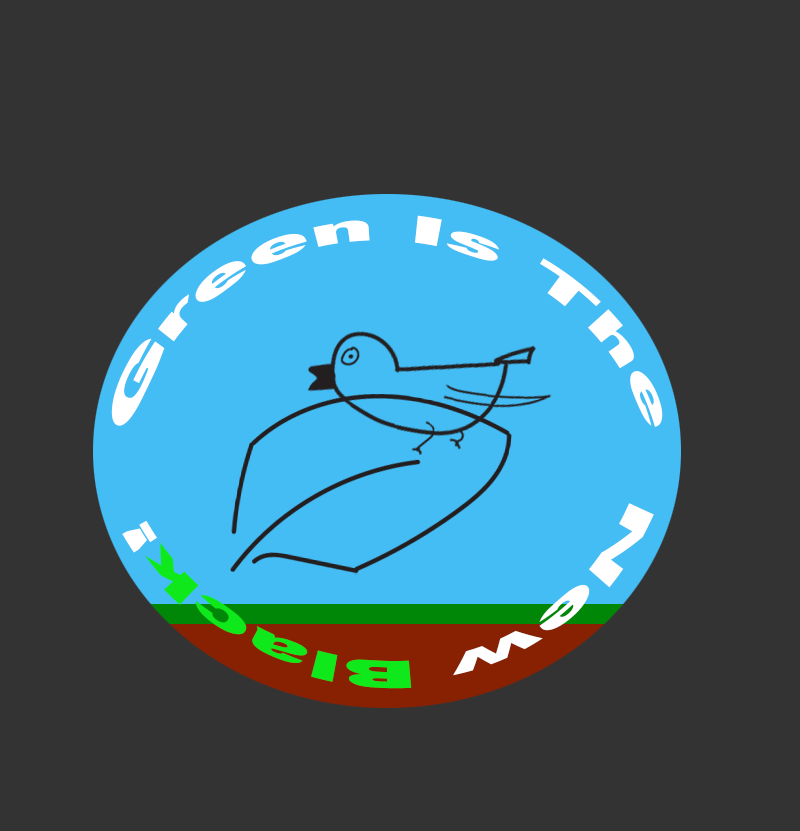
<style>
.page{position:relative;width:800px;height:831px;background:#333333}
.page>*{position:absolute;margin:0}
.t1{font:38px "Arial-Black";color:#ffffff}
.t2{font:38px "Arial-Black";color:#0fe81a}
</style>
<div class="page">
<p class="t1" style="left:111px;top:215px;width:552px;height:212px;rotate:16deg">Green Is The</p>
<p class="t2" style="left:122px;top:503px;width:532px;height:186px;rotate:-157deg"><span class="t1">New </span>Black<span class="t1">!</span></p>
</div>
